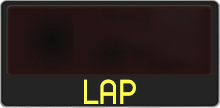
<style>
.page{position:relative;width:220px;height:108px;background:#242424}
.page>*{position:absolute;margin:0}
.t1{font:34.4px "ELURERegular";color:#ffff47;text-transform:uppercase;scale:0.9 1}
</style>
<div class="page">
<p class="t1" style="left:84px;top:79px;width:52px;height:25px">lAP</p>
</div>
